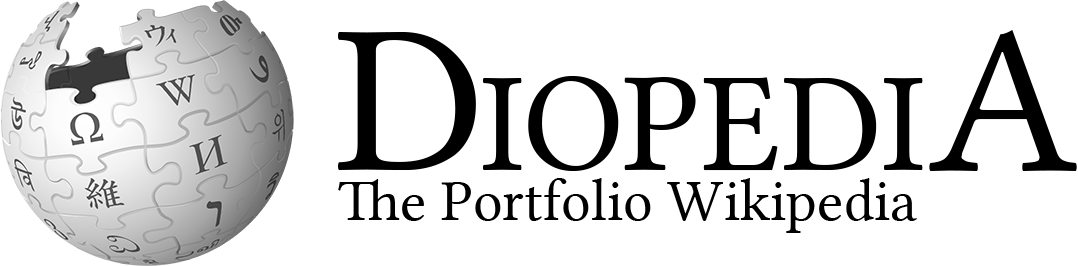
<style>
.page{position:relative;width:1078px;height:266px;background:#ffffff}
.page>*{position:absolute;margin:0}
.t1{font:214.3px "LinLibertine";color:#000000}
.t2{font:142.9px "LinLibertine";color:#000000}
.t3{font:59.2px "LinLibertine";color:#000000}
</style>
<div class="page">
<p class="t1" style="left:929px;top:30px;width:148px;height:141px">A</p>
<p class="t1" style="left:338px;top:32px;width:138px;height:138px">D</p>
<p class="t2" style="left:483px;top:76px;width:440px;height:95px">IOPEDI</p>
<p class="t3" style="left:338px;top:178px;width:579px;height:55px">The Portfolio Wikipedia</p>
</div>
